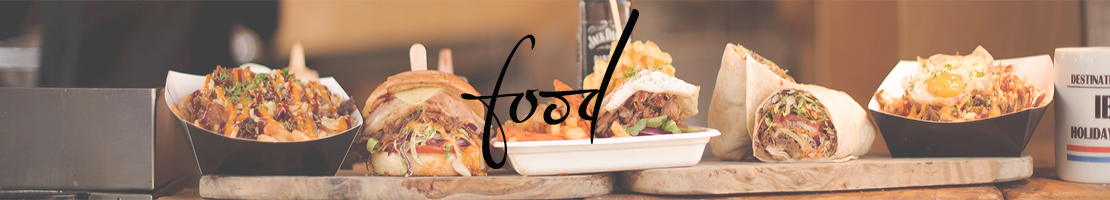
<style>
.page{position:relative;width:1110px;height:200px}
.page>*{position:absolute;margin:0}
.t1{font:120px "Olicana-Smooth";color:#060606}
</style>
<div class="page">
<p class="t1" style="left:461px;top:9px;width:178px;height:160px">food</p>
</div>
